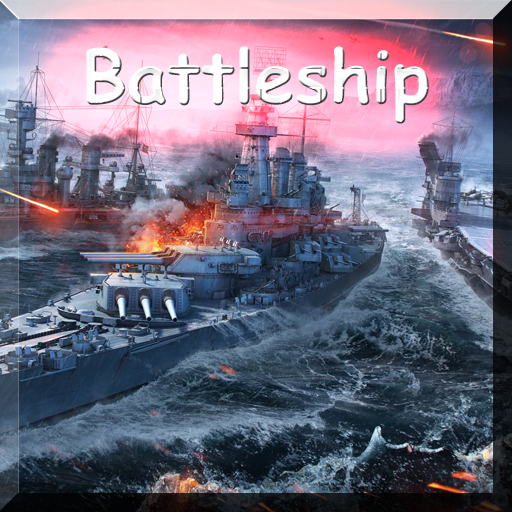
<style>
.page{position:relative;width:512px;height:512px}
.page>*{position:absolute;margin:0}
.t1{font:72px "ComicSansMS-Bold";color:#ffffff}
</style>
<div class="page">
<p class="t1" style="left:86px;top:46px;width:343px;height:78px">Battleship</p>
</div>
